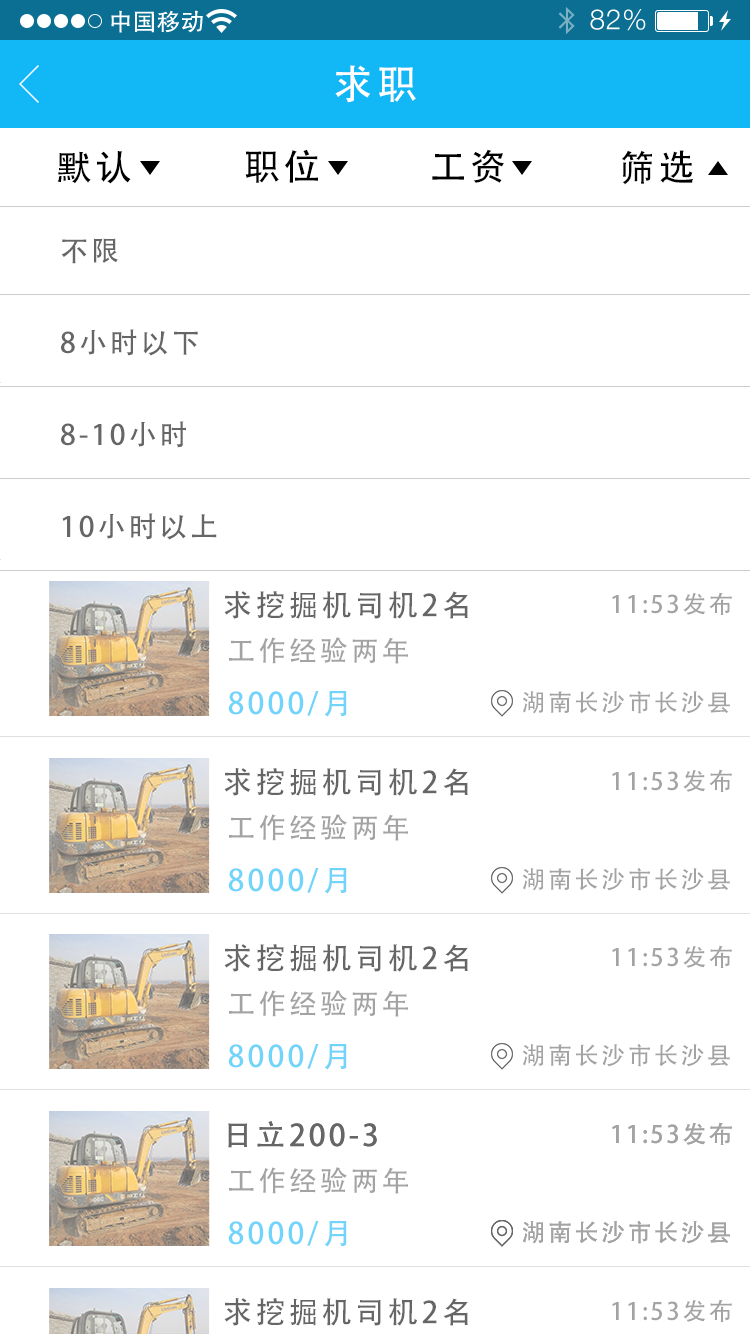
<style>
.page{position:relative;width:750px;height:1334px;background:#ffffff}
.page>*{position:absolute;margin:0}
.t1{font:40px "AdobeHeitiStd-Regular";letter-spacing:0.104em;color:#ffffff}
.t2{font:36px "AdobeHeitiStd-Regular";letter-spacing:0.104em;color:#000000}
.t3{font:28px "AdobeHeitiStd-Regular";letter-spacing:0.104em;color:#666666}
.t4{font:30px "AdobeHeitiStd-Regular";letter-spacing:0.104em;color:#666666}
.t5{font:24px "AdobeHeitiStd-Regular";letter-spacing:0.104em;color:#a3a3a3}
.t6{font:28px "AdobeHeitiStd-Regular";letter-spacing:0.104em;color:#a3a3a3}
.t7{font:30px "AdobeHeitiStd-Regular";letter-spacing:0.104em;color:#71d4fa}
</style>
<div class="page">
<p class="t1" style="left:335px;top:65px;width:81px;height:38px">求职</p>
<p class="t2" style="left:245px;top:149px;width:73px;height:34px">职位</p>
<p class="t2" style="left:432px;top:149px;width:72px;height:34px">工资</p>
<p class="t2" style="left:621px;top:150px;width:73px;height:35px">筛选</p>
<p class="t2" style="left:57px;top:151px;width:74px;height:33px">默认</p>
<p class="t3" style="left:61px;top:238px;width:57px;height:26px">不限</p>
<p class="t3" style="left:61px;top:329px;width:137px;height:27px">8小时以下</p>
<p class="t3" style="left:61px;top:421px;width:125px;height:27px">8-10小时</p>
<p class="t3" style="left:62px;top:513px;width:155px;height:27px">10小时以上</p>
<p class="t4" style="left:224px;top:591px;width:244px;height:28px">求挖掘机司机2名</p>
<p class="t5" style="left:612px;top:592px;width:120px;height:23px">11:53发布</p>
<p class="t6" style="left:229px;top:637px;width:179px;height:27px">工作经验两年</p>
<p class="t7" style="left:228px;top:691px;width:119px;height:26px">8000/月</p>
<p class="t5" style="left:523px;top:691px;width:207px;height:23px">湖南长沙市长沙县</p>
<p class="t4" style="left:224px;top:768px;width:244px;height:28px">求挖掘机司机2名</p>
<p class="t5" style="left:612px;top:769px;width:120px;height:23px">11:53发布</p>
<p class="t6" style="left:229px;top:814px;width:179px;height:27px">工作经验两年</p>
<p class="t7" style="left:228px;top:868px;width:119px;height:26px">8000/月</p>
<p class="t5" style="left:523px;top:868px;width:207px;height:23px">湖南长沙市长沙县</p>
<p class="t4" style="left:224px;top:944px;width:244px;height:28px">求挖掘机司机2名</p>
<p class="t5" style="left:612px;top:945px;width:120px;height:23px">11:53发布</p>
<p class="t6" style="left:229px;top:990px;width:179px;height:27px">工作经验两年</p>
<p class="t7" style="left:228px;top:1044px;width:119px;height:26px">8000/月</p>
<p class="t5" style="left:523px;top:1044px;width:207px;height:23px">湖南长沙市长沙县</p>
<p class="t4" style="left:228px;top:1121px;width:149px;height:27px">日立200-3</p>
<p class="t4" style="left:228px;top:1121px;width:149px;height:27px">日立200-3</p>
<p class="t5" style="left:612px;top:1122px;width:120px;height:23px">11:53发布</p>
<p class="t5" style="left:612px;top:1122px;width:120px;height:23px">11:53发布</p>
<p class="t6" style="left:229px;top:1167px;width:179px;height:27px">工作经验两年</p>
<p class="t7" style="left:228px;top:1221px;width:119px;height:26px">8000/月</p>
<p class="t5" style="left:523px;top:1221px;width:207px;height:23px">湖南长沙市长沙县</p>
<p class="t5" style="left:523px;top:1221px;width:207px;height:23px">湖南长沙市长沙县</p>
<p class="t4" style="left:224px;top:1298px;width:244px;height:28px">求挖掘机司机2名</p>
<p class="t5" style="left:612px;top:1299px;width:120px;height:23px">11:53发布</p>
</div>
